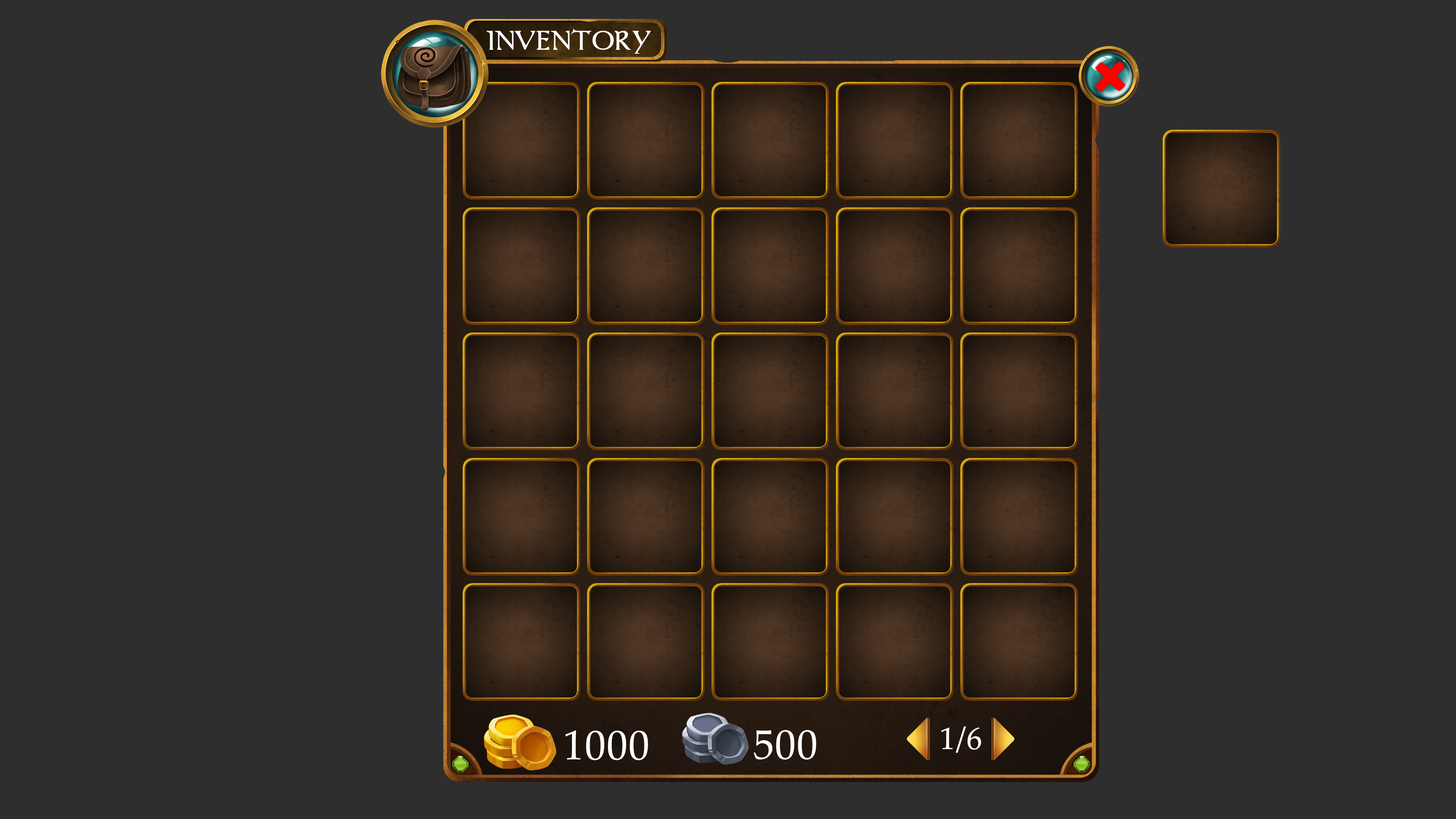
<style>
.page{position:relative;width:1456px;height:819px;background:#2e2e2e}
.page>*{position:absolute;margin:0}
.t1{font:30.8px "Dumbledor1";color:#fefefe}
.t2{font:41.5px "PalatinoLinotype-Roman";color:#ffffff;font-weight:bold}
.t3{font:30.8px "PalatinoLinotype-Roman";color:#ffffff;font-weight:bold}
</style>
<div class="page">
<p class="t1" style="left:486px;top:28px;width:165px;height:26px">INVENTORY</p>
<p class="t2" style="left:566px;top:730px;width:82px;height:30px">1000</p>
<p class="t2" style="left:754px;top:730px;width:62px;height:29px">500</p>
<p class="t3" style="left:942px;top:726px;width:40px;height:27px">1/6</p>
</div>
